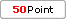
<style>
.page{position:relative;width:66px;height:19px;background:#ffffff}
.page>*{position:absolute;margin:0}
.t1{font:10px "Verdana";letter-spacing:-0.05em;color:#000000}
.t2{font:10px "Verdana";letter-spacing:-0.1em;color:#f20d0d;font-weight:bold}
.t3{font:10px "Verdana";color:#f20d0d;font-weight:bold}
.t4{font:10px "Verdana";color:#000000}
</style>
<div class="page">
<p class="t1" style="left:13px;top:6px;width:40px;height:7px"><span class="t2">5</span><span class="t3">0</span><span class="t4">P</span>oint</p>
</div>
